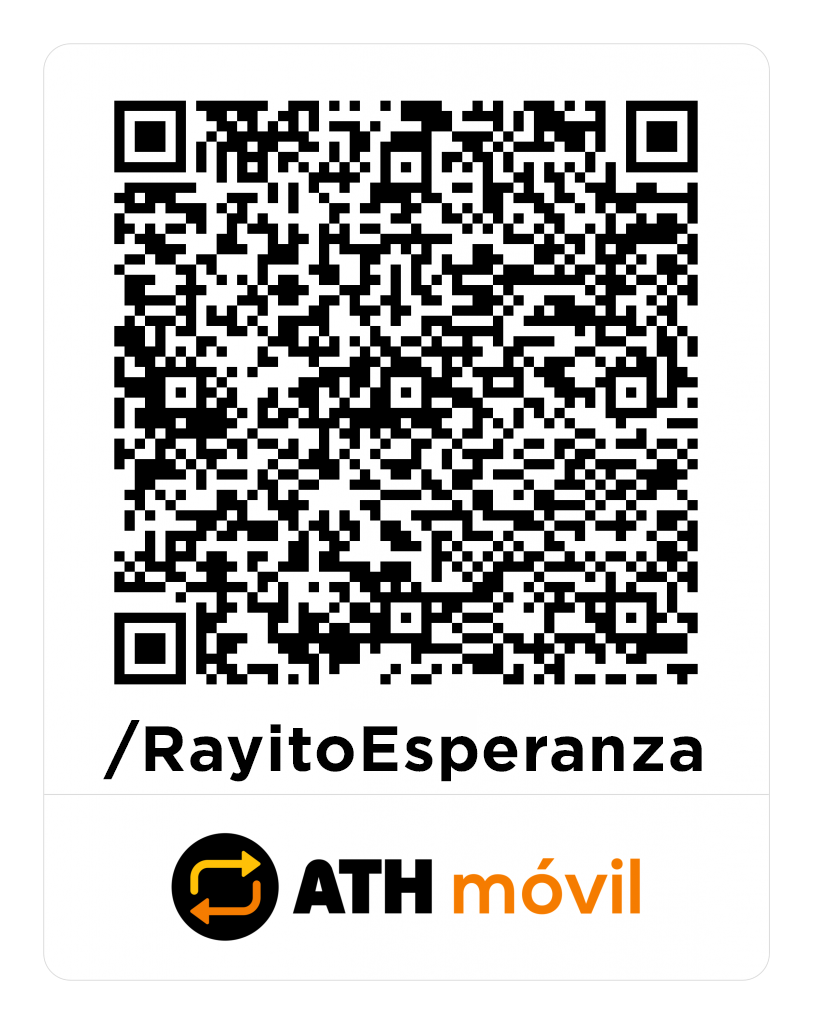
<style>
.page{position:relative;width:813px;height:1024px;background:#ffffff}
.page>*{position:absolute;margin:0}
.t1{font:64px "Gotham-Bold";letter-spacing:0.025em;color:#000000}
</style>
<div class="page">
<p class="t1" style="left:103px;top:720px;width:599px;height:62px">/RayitoEsperanza</p>
</div>
